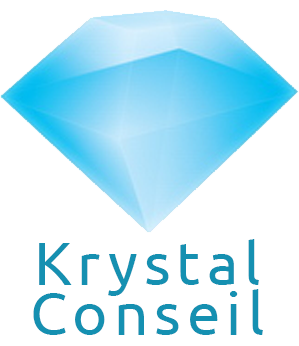
<style>
.page{position:relative;width:299px;height:346px;background:#ffffff}
.page>*{position:absolute;margin:0}
.t1{font:60px/50px "Ubuntu";letter-spacing:0.1em;color:#1590b1}
</style>
<div class="page">
<p class="t1" style="left:33px;top:239px;width:230px;height:96px;text-align:center">Krystal<br>Conseil</p>
</div>
